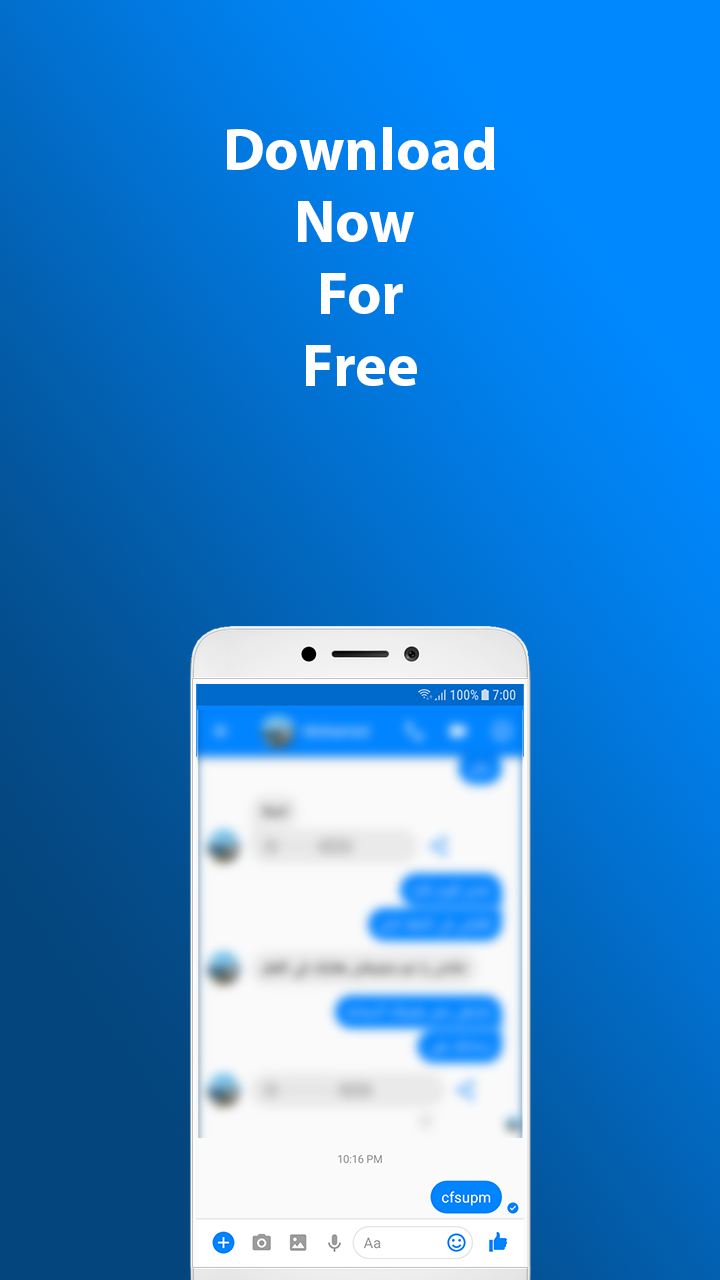
<style>
.page{position:relative;width:720px;height:1280px}
.page>*{position:absolute;margin:0}
.t1{font:60px "MyriadPro-Bold";color:#ffffff}
</style>
<div class="page">
<p class="t1" style="left:227px;top:127px;width:268px;height:259px;text-align:center">Download<br>Now <br>For<br>Free</p>
</div>
